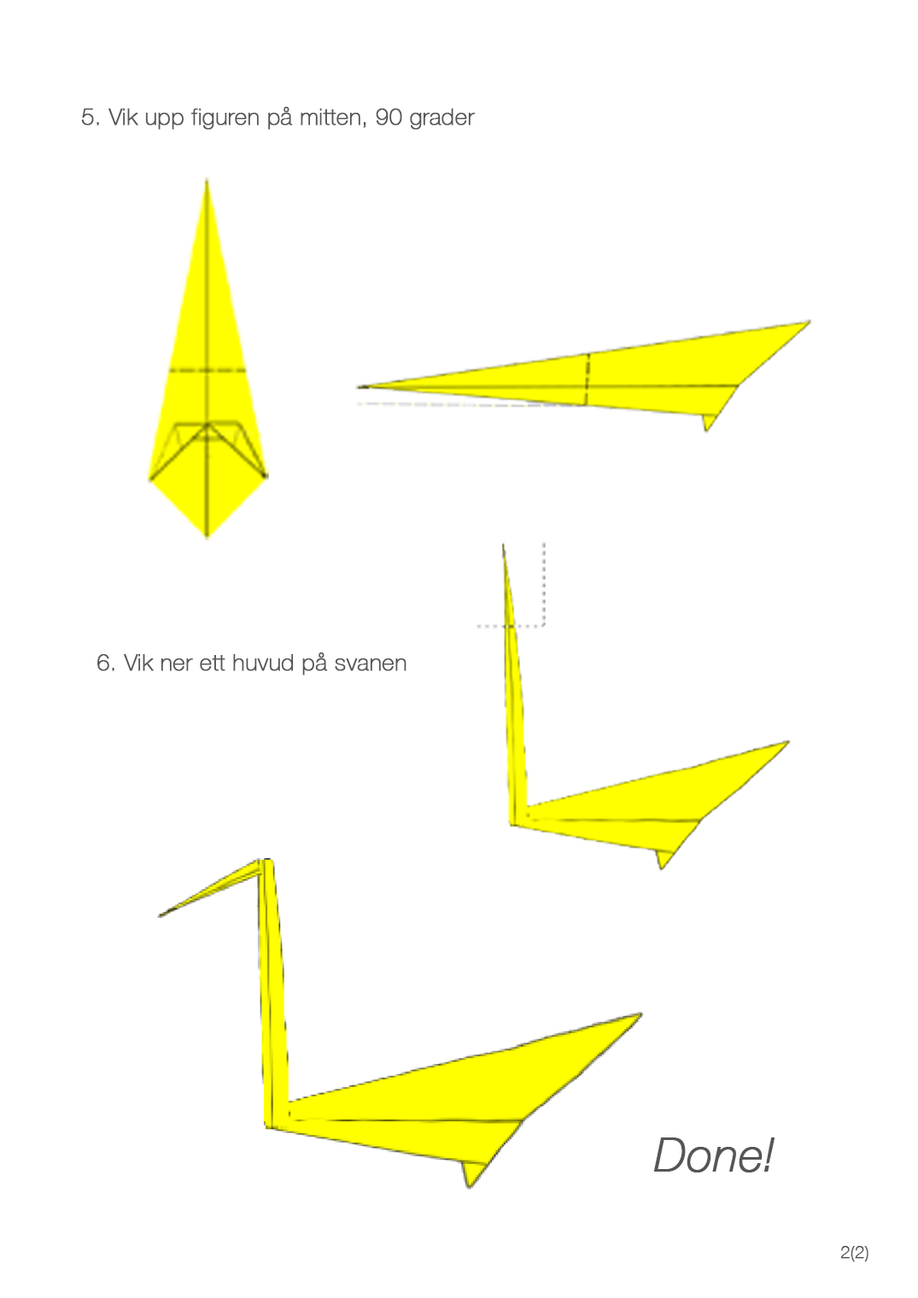
<style>
.page{position:relative;width:918px;height:1298px;background:#ffffff}
.page>*{position:absolute;margin:0}
.t1{font:23.1px "HelveticaNeue-Thin";color:#555555;font-weight:bold}
.t2{font:46.3px "HelveticaNeue-ThinItalic";color:#555555;font-weight:bold}
.t3{font:17px "HelveticaNeue-Thin";color:#555555;font-weight:bold}
</style>
<div class="page">
<p class="t1" style="left:81px;top:107px;width:395px;height:23px">5. Vik upp figuren på mitten, 90 grader</p>
<p class="t1" style="left:97px;top:653px;width:310px;height:23px">6. Vik ner ett huvud på svanen</p>
<p class="t2" style="left:654px;top:1138px;width:122px;height:35px">Done!</p>
<p class="t3" style="left:841px;top:1246px;width:28px;height:17px">2(2)</p>
</div>
